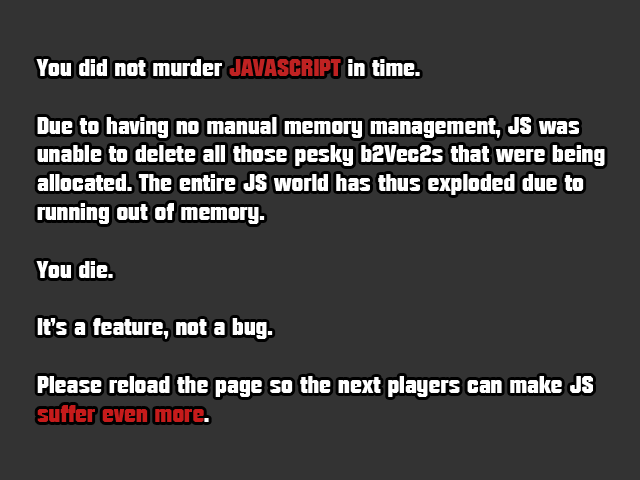
<style>
.page{position:relative;width:640px;height:480px;background:#333333}
.page>*{position:absolute;margin:0}
.t1{font:24px "Autumn";color:#ffffff}
.t2{font:24px "Autumn";color:#bf2222}
.t3{font:24px "Autumn";color:#c61b1b}
</style>
<div class="page">
<p class="t1" style="left:36px;top:59px;width:569px;height:363px">You did not murder <span class="t2">JAVASCRIPT</span> in time.<br><br>Due to having no manual memory management, JS was<br>unable to delete all those pesky b2Vec2s that were being<br>allocated. The entire JS world has thus exploded due to<br>running out of memory.<br><br>You die. <br><br>It’s a feature, not a bug.<br><br>Please reload the page so the next players can make JS<br><span class="t3">suffer even more</span>.</p>
</div>
